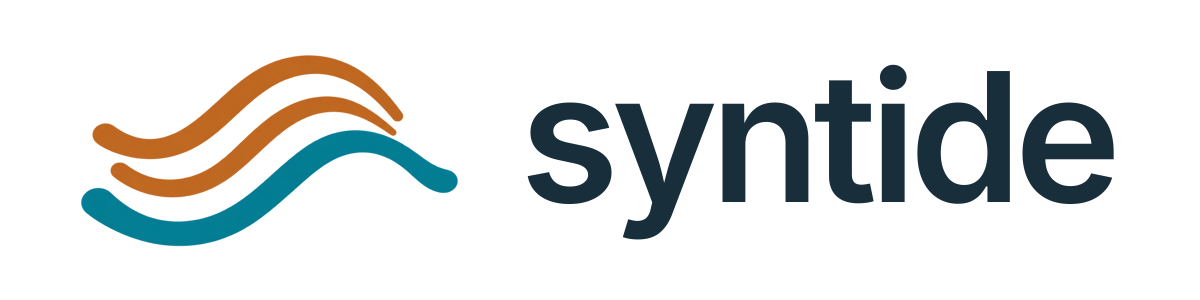
<style>
.page{position:relative;width:1200px;height:300px;background:#ffffff}
.page>*{position:absolute;margin:0}
.t1{font:180px "Inter-SemiBold";letter-spacing:-0.04em;color:#192e3b}
</style>
<div class="page">
<p class="t1" style="left:526px;top:64px;width:589px;height:177px">syntide</p>
</div>
